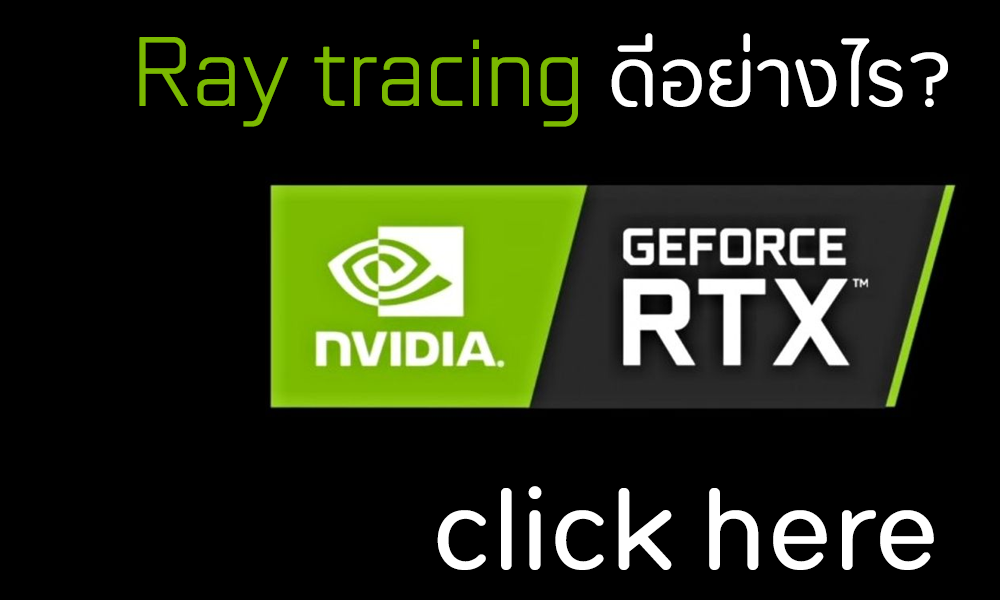
<style>
.page{position:relative;width:1000px;height:600px;background:#000000}
.page>*{position:absolute;margin:0}
.t1{font:100px "GeForce-Light";color:#7bb900;font-weight:bold}
.t2{font:66.7px "Opun-Regular";color:#ffffff;font-weight:bold}
.t3{font:100px "Opun-Regular";color:#ffffff;font-weight:bold}
</style>
<div class="page">
<p class="t1" style="left:139px;top:33px;width:809px;height:94px">Ray tracing <span class="t2">ดีอย่างไร?</span></p>
<p class="t3" style="left:437px;top:486px;width:497px;height:84px">click here</p>
</div>
